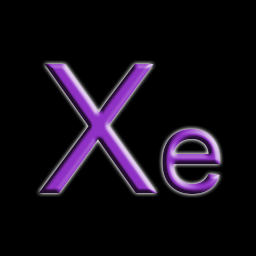
<style>
.page{position:relative;width:256px;height:256px;background:#000000}
.page>*{position:absolute;margin:0}
.t1{font:180px "ArialMT"}
.t2{font:120px "ArialMT"}
</style>
<div class="page">
<p class="t1" style="left:38px;top:64px;width:182px;height:130px">X<span class="t2">e</span></p>
</div>
